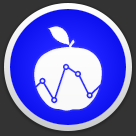
<style>
.page{position:relative;width:136px;height:136px;background:#333333}
.page>*{position:absolute;margin:0}
.t1{font:90px "kcal";color:#ffffff}
.t2{font:66px "MyriadPro-Regular";color:#ffffff}
</style>
<div class="page">
<p class="t1" style="left:34px;top:26px;width:68px;height:85px;text-align:center">k<br><span class="t2">k</span></p>
</div>
